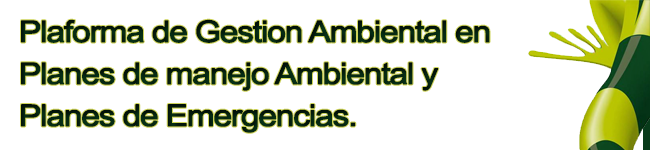
<style>
.page{position:relative;width:650px;height:150px;background:#ffffff}
.page>*{position:absolute;margin:0}
.t1{font:29.7px/42px "ArialMT";letter-spacing:-0.06em;color:#05230f;font-weight:bold;scale:1.12 1}
</style>
<div class="page">
<p class="t1" style="left:21px;top:19px;width:469px;height:114px">Plaforma de Gestion Ambiental en <br>Planes de manejo Ambiental y <br>Planes de Emergencias.</p>
</div>
